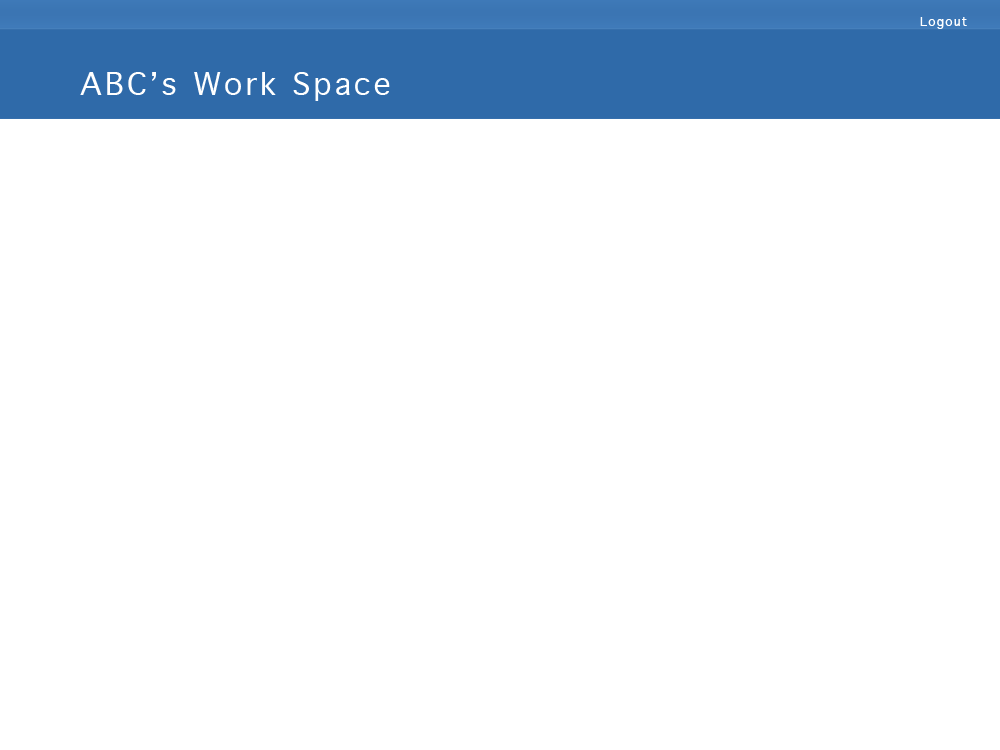
<style>
.page{position:relative;width:1000px;height:750px;background:#ffffff}
.page>*{position:absolute;margin:0}
.t1{font:12px "Geneva";letter-spacing:0.1em;color:#ffffff}
.t2{font:30px "Geneva";letter-spacing:0.1em;color:#ffffff}
</style>
<div class="page">
<p class="t1" style="left:920px;top:17px;width:47px;height:12px">Logout</p>
<p class="t2" style="left:80px;top:72px;width:310px;height:29px">ABC’s Work Space</p>
</div>
